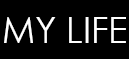
<style>
.page{position:relative;width:129px;height:59px;background:#000000}
.page>*{position:absolute;margin:0}
.t1{font:36px "CenturyGothic";color:#ffffff}
</style>
<div class="page">
<p class="t1" style="left:4px;top:17px;width:122px;height:26px">MY LIFE</p>
</div>
